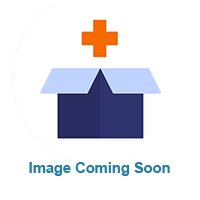
<style>
.page{position:relative;width:200px;height:200px;background:#ffffff}
.page>*{position:absolute;margin:0}
.t1{font:14.7px "Arial-BoldMT";color:#267ea3}
</style>
<div class="page">
<p class="t1" style="left:29px;top:162px;width:141px;height:14px">Image Coming Soon</p>
</div>
